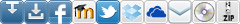
<style>
.page{position:relative;width:240px;height:24px}
.page>*{position:absolute;margin:0}
.t1{font:8.2px "TwCenMT-Bold";color:#000000}
</style>
<div class="page">
<p class="t1" style="left:222px;top:15px;width:12px;height:6px">ZIP</p>
</div>
